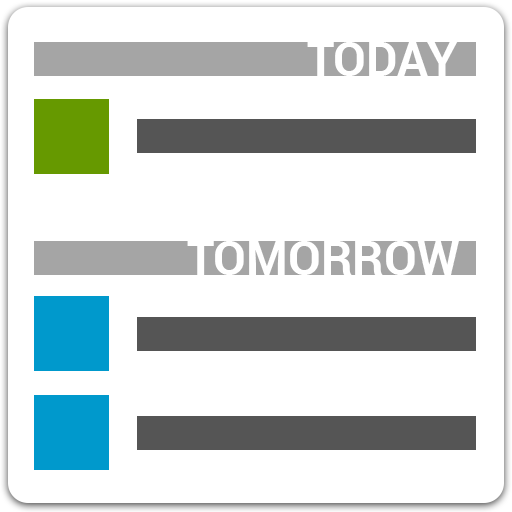
<style>
.page{position:relative;width:512px;height:512px;background:#ffffff}
.page>*{position:absolute;margin:0}
.t1{font:48px "Roboto-Bold";color:#ffffff;text-transform:uppercase}
</style>
<div class="page">
<p class="t1" style="left:307px;top:42px;width:151px;height:34px">TODAY</p>
<p class="t1" style="left:187px;top:241px;width:272px;height:34px">TOMORROW</p>
</div>
